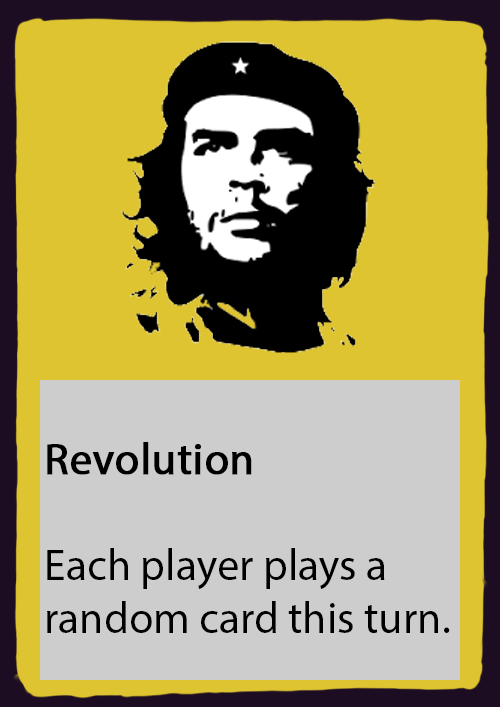
<style>
.page{position:relative;width:500px;height:707px;background:#dec430}
.page>*{position:absolute;margin:0}
.t1{font:44px "MyriadPro-Regular";color:#000000}
.t2{font:44px "MyriadPro-Regular";color:#000000;font-weight:bold}
</style>
<div class="page">
<p class="t1" style="left:47px;top:442px;width:403px;height:191px"><span class="t2">Revolution<br></span><br>Each player plays a <br>random card this turn.</p>
</div>
